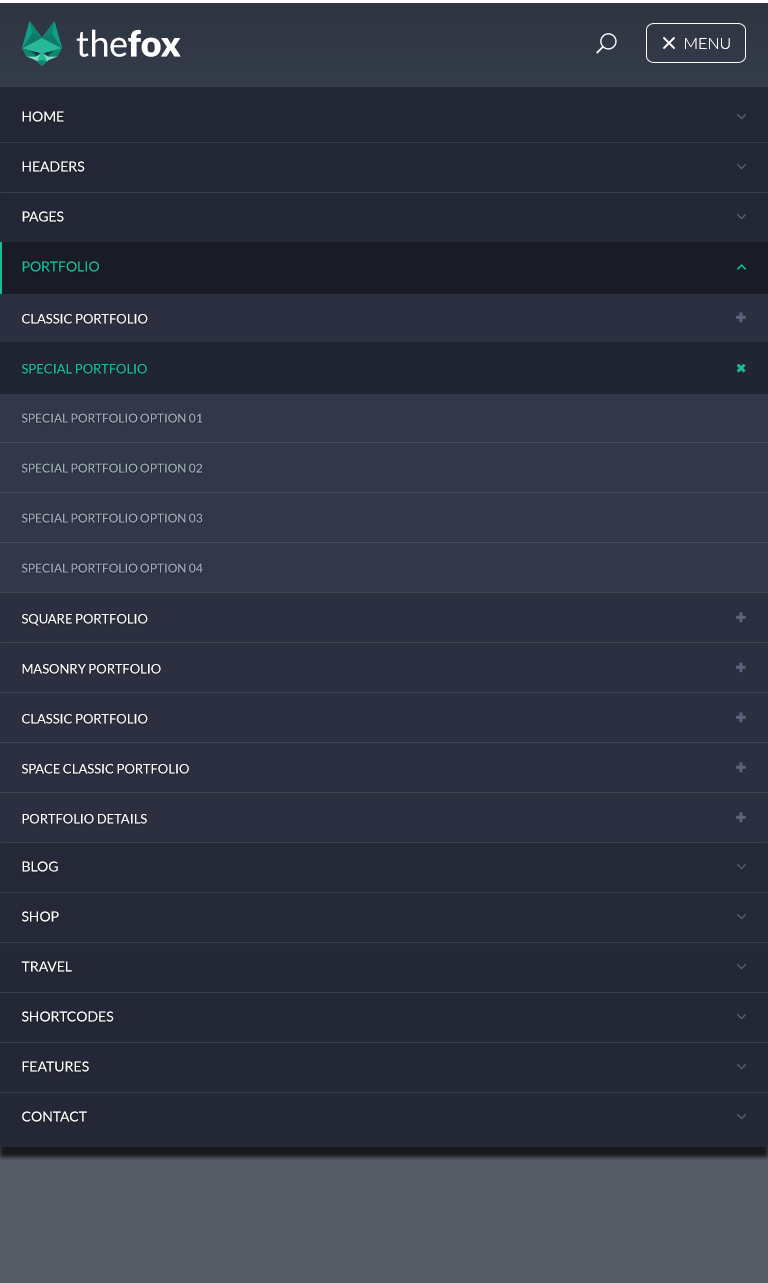
<style>
.page{position:relative;width:768px;height:1283px;background:#2b2f3f}
.page>*{position:absolute;margin:0}
.t1{font:36px "Lato-Regular";color:#ffffff}
.t2{font:36px "Lato-Black";color:#ffffff}
.t3{font:16px "Lato-Light";color:#ffffff;text-transform:uppercase}
.t4{font:14px/50px "Lato-Regular";color:#ffffff;text-transform:uppercase}
.t5{font:14px/50px "Lato-Regular";color:#1abc9c;text-transform:uppercase}
.t6{font:13px/50px "Lato-Regular";color:#ffffff;text-transform:uppercase}
.t7{font:13px/50px "Lato-Regular";color:#1abc9c;text-transform:uppercase}
.t8{font:12px/50px "Lato-Regular";color:#a1b1bc;text-transform:uppercase}
</style>
<div class="page">
<p class="t1" style="left:76px;top:29px;width:105px;height:28px">the<span class="t2">fox</span></p>
<p class="t3" style="left:685px;top:38px;width:45px;height:11px">MENU</p>
<p class="t4" style="left:21px;top:111px;width:93px;height:1011px">Home<br>HEADERS<br>Pages<br><span class="t5">Portfolio<br></span><br><br><br><br><br><br><br><br><br><br><br>Blog<br>shop<br>travel<br>shortcodes<br>features<br>contact</p>
<p class="t6" style="left:22px;top:314px;width:167px;height:510px">classic portfolio<br><span class="t7">special portfolio<br></span><br><br><br><br>square portfolio<br>masonry portfolio<br>classic portfolio<br>space classic portfolio<br>portfolio details</p>
<p class="t8" style="left:22px;top:413px;width:181px;height:160px">special portfolio option 01<br>special portfolio option 02<br>special portfolio option 03<br>special portfolio option 04</p>
</div>
